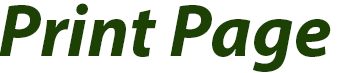
<style>
.page{position:relative;width:340px;height:73px;background:#ffffff}
.page>*{position:absolute;margin:0}
.t1{font:75px "MyriadPro-BoldIt";color:#1d4004}
</style>
<div class="page">
<p class="t1" style="left:0px;top:3px;width:331px;height:69px">Print Page</p>
</div>
